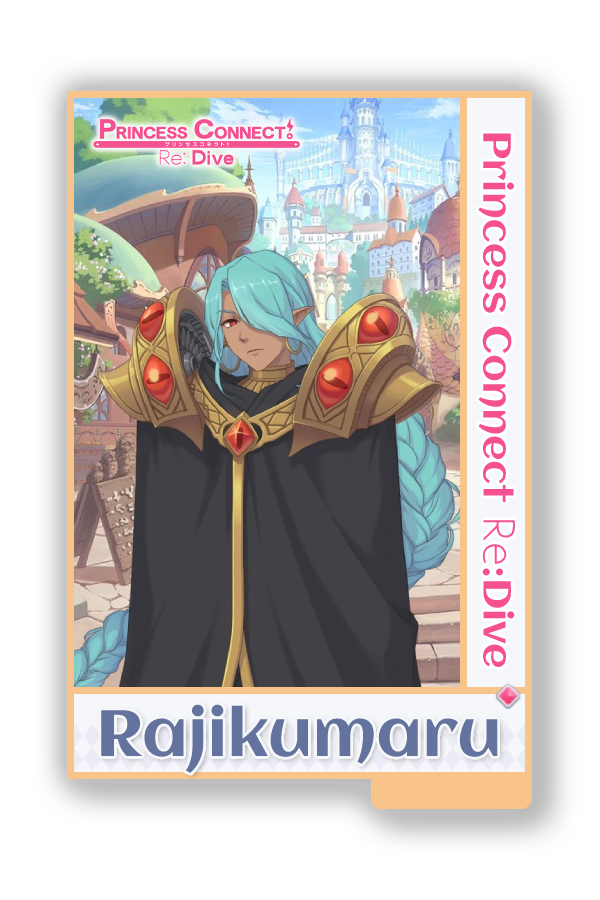
<style>
.page{position:relative;width:600px;height:900px;background:#ffffff}
.page>*{position:absolute;margin:0}
.t1{font:39px "Aclonica-Regular";color:#f55191}
.t2{font:39px "AaarghNormal";color:#f55191}
.t3{font:65px "Aclonica-Regular";color:#64739d}
</style>
<div class="page">
<p class="t1" style="left:478px;top:133px;width:38px;height:534px;rotate:90deg">Princess Connect <span class="t2">Re</span>:Dive</p>
<p class="t3" style="left:101px;top:704px;width:397px;height:69px">Rajikumaru</p>
</div>
